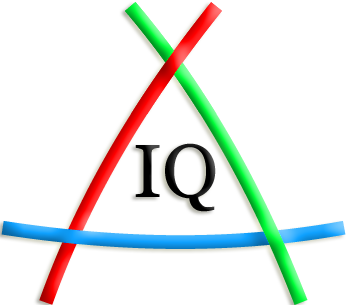
<style>
.page{position:relative;width:347px;height:305px;background:#ffffff}
.page>*{position:absolute;margin:0}
.t1{font:75px "Georgia";color:#000000}
</style>
<div class="page">
<p class="t1" style="left:135px;top:143px;width:81px;height:69px">IQ</p>
</div>
